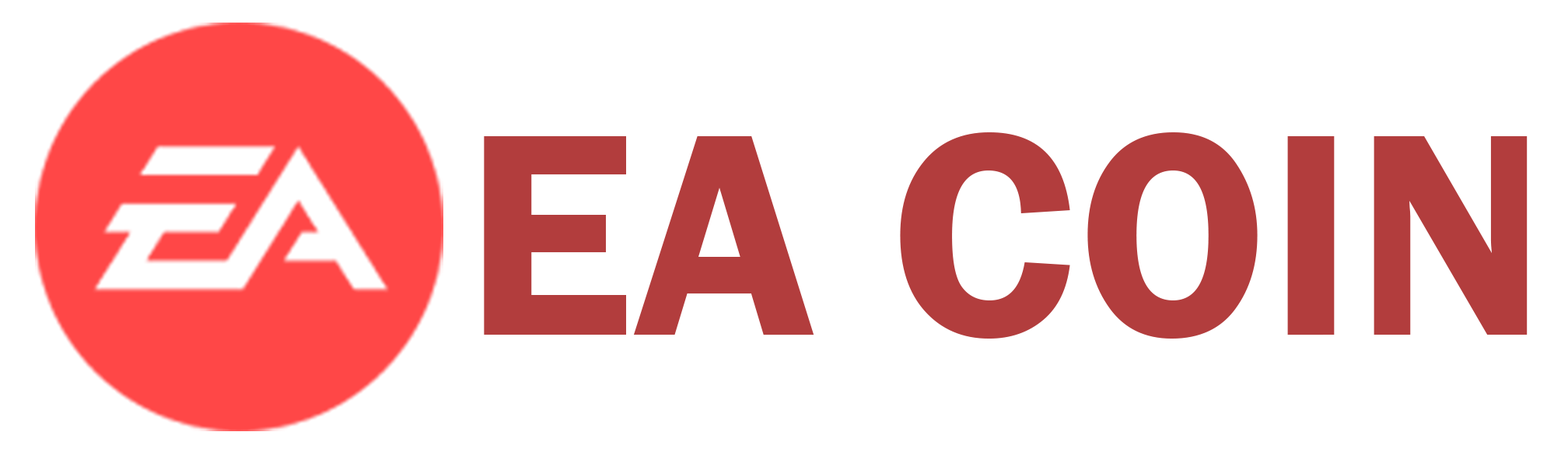
<style>
.page{position:relative;width:1568px;height:467px;background:#ffffff}
.page>*{position:absolute;margin:0}
.t1{font:298.1px "FranklinGothic-Demi";color:#b23d3d}
</style>
<div class="page">
<p class="t1" style="left:484px;top:132px;width:1044px;height:206px">EA COIN</p>
</div>
